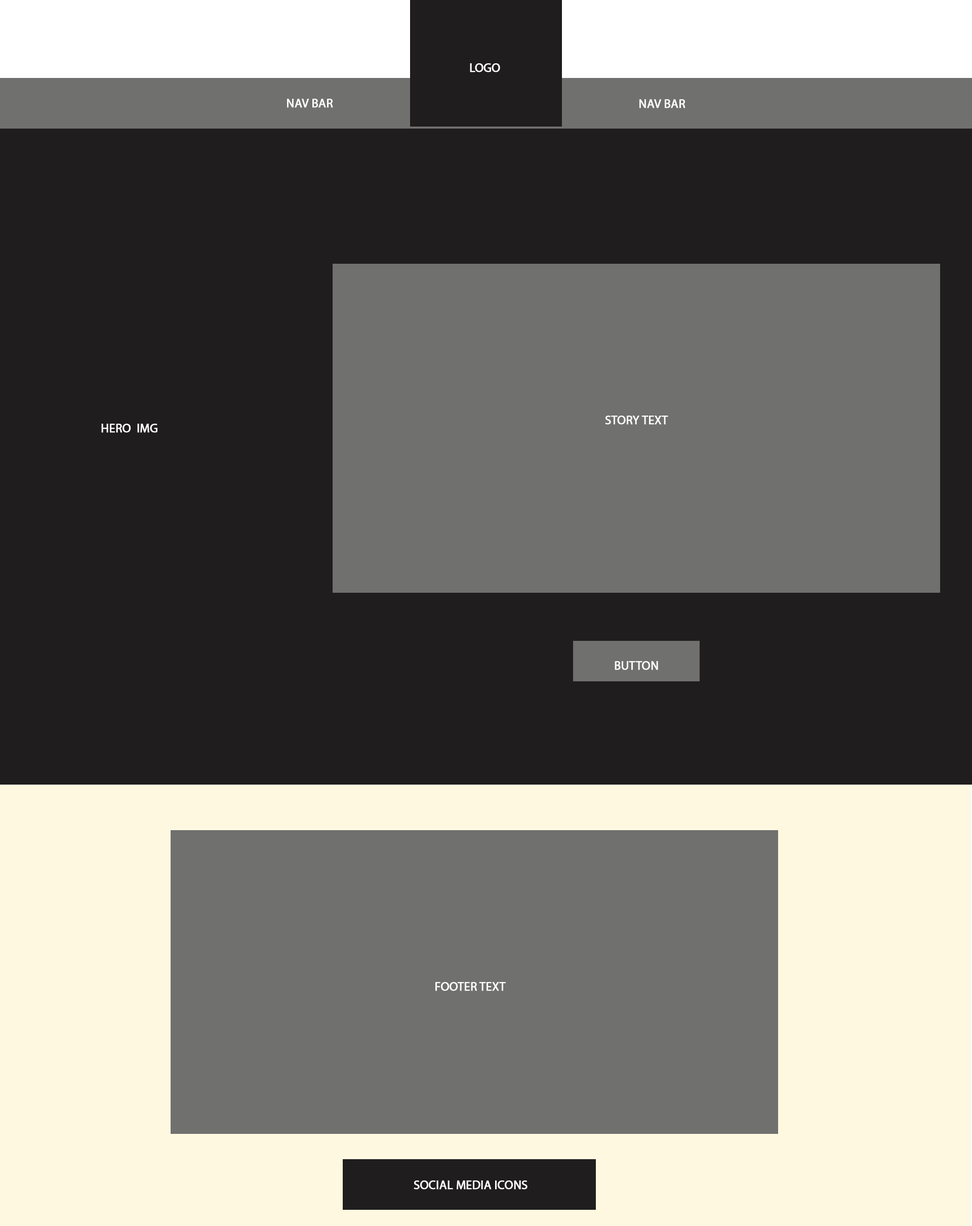
<style>
.page{position:relative;width:972px;height:1226px;background:#201d1e}
.page>*{position:absolute;margin:0}
.t1{font:12.2px "MyriadPro-Regular";letter-spacing:-0.003em;color:#ffffff;font-weight:bold}
.t2{font:12.2px "MyriadPro-Regular";letter-spacing:-0.003em;color:#fefefe;font-weight:bold}
</style>
<div class="page">
<p class="t1" style="left:470px;top:63px;width:30px;height:9px">LOGO</p>
<p class="t2" style="left:287px;top:99px;width:46px;height:9px">NAV BAR</p>
<p class="t2" style="left:640px;top:99px;width:46px;height:9px">NAV BAR</p>
<p class="t2" style="left:101px;top:424px;width:56px;height:9px">HERO  IMG</p>
<p class="t2" style="left:605px;top:416px;width:63px;height:9px">STORY TEXT</p>
<p class="t2" style="left:615px;top:661px;width:43px;height:9px">BUTTON</p>
<p class="t1" style="left:435px;top:982px;width:71px;height:9px">FOOTER TEXT</p>
<p class="t1" style="left:414px;top:1181px;width:114px;height:9px">SOCIAL MEDIA ICONS</p>
</div>
